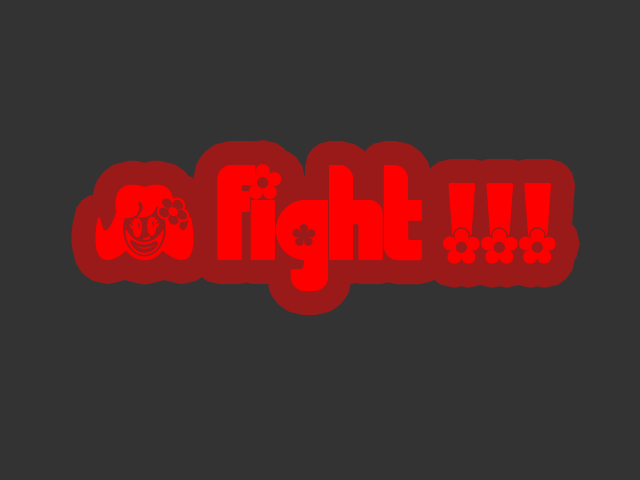
<style>
.page{position:relative;width:640px;height:480px;background:#333333}
.page>*{position:absolute;margin:0}
.t1{font:120px "Chick";color:#ff0000}
</style>
<div class="page">
<p class="t1" style="left:95px;top:164px;width:461px;height:127px">§ fight !!!</p>
</div>
